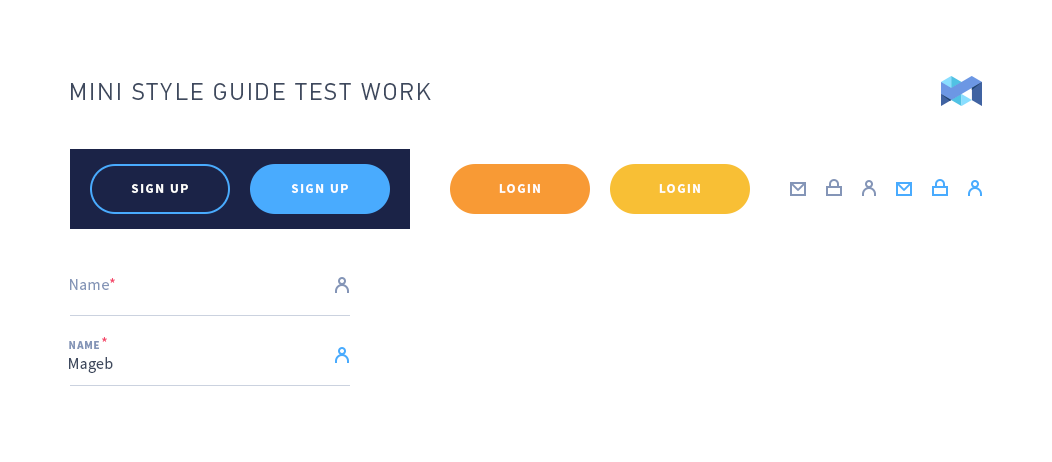
<style>
.page{position:relative;width:1052px;height:462px;background:#ffffff}
.page>*{position:absolute;margin:0}
.t1{font:24px "PFDinTextPro-Light";letter-spacing:0.1em;color:#3e495e;text-transform:uppercase}
.t2{font:13px "SourceSansPro-Bold";letter-spacing:0.12em;color:#ffffff}
.t3{font:16px "SourceSansPro-Regular";letter-spacing:0.02em;color:#8495b7}
.t4{font:16px "SourceSansPro-Regular";letter-spacing:0.02em;color:#f44368}
.t5{font:11px "SourceSansPro-Bold";letter-spacing:0.1em;color:#8495b7;text-transform:uppercase}
.t6{font:16px "SourceSansPro-Regular";letter-spacing:0.1em;color:#f44368}
.t7{font:16px "SourceSansPro-Regular";letter-spacing:0.02em;color:#3e495e}
</style>
<div class="page">
<p class="t1" style="left:71px;top:83px;width:360px;height:17px">Mini Style guide test work</p>
<p class="t2" style="left:131px;top:184px;width:57px;height:9px">SIGN UP</p>
<p class="t2" style="left:291px;top:184px;width:57px;height:9px">SIGN UP</p>
<p class="t2" style="left:499px;top:184px;width:41px;height:9px">LOGIN</p>
<p class="t2" style="left:659px;top:184px;width:41px;height:9px">LOGIN</p>
<p class="t3" style="left:70px;top:278px;width:45px;height:12px">Name<span class="t4">*</span></p>
<p class="t5" style="left:69px;top:337px;width:38px;height:12px">Name<span class="t6">*</span></p>
<p class="t7" style="left:69px;top:357px;width:44px;height:16px">Mageb</p>
</div>
